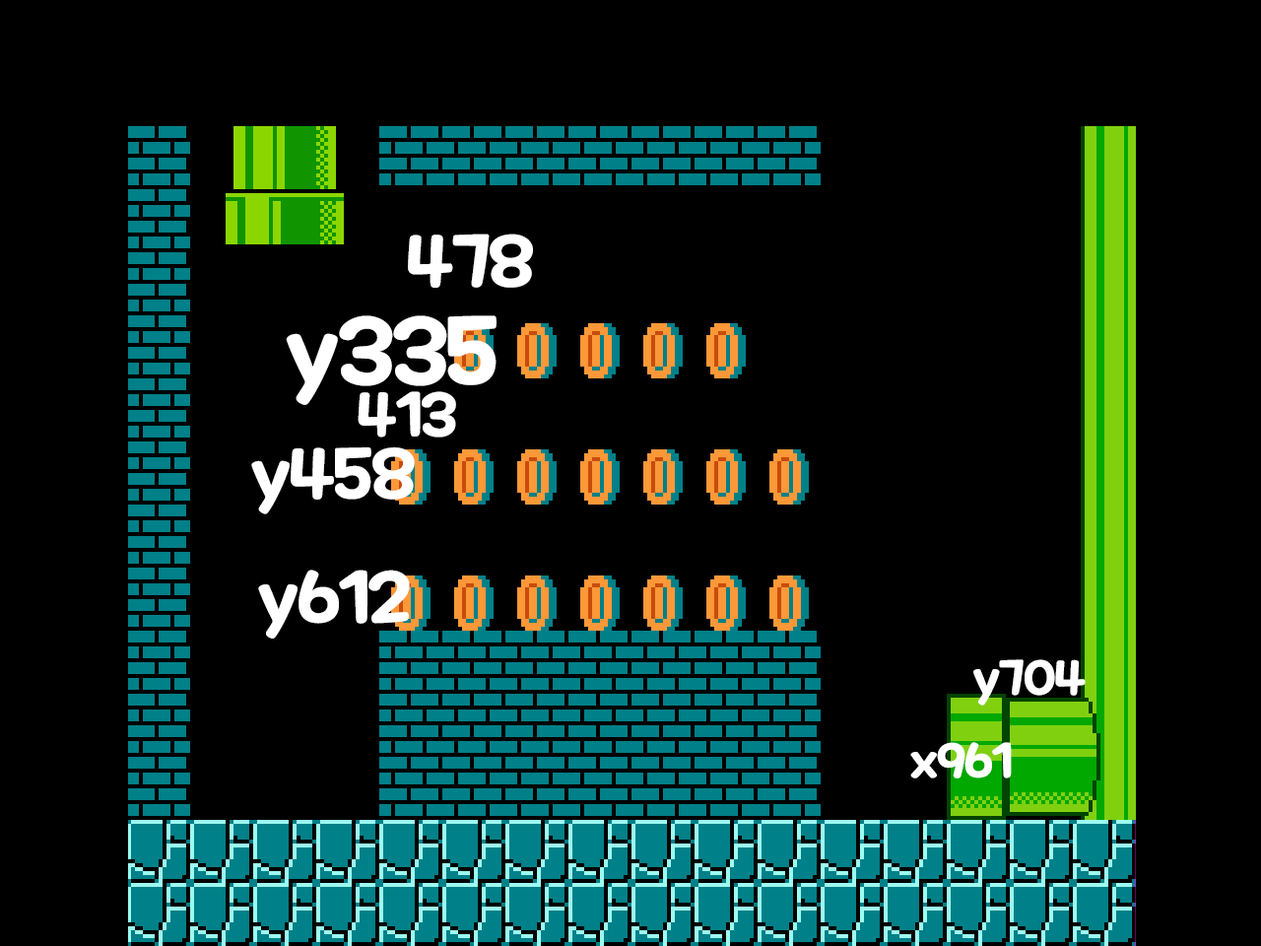
<style>
.page{position:relative;width:1261px;height:946px;background:#000000}
.page>*{position:absolute;margin:0}
.t1{font:71.2px "MaplestoryBold";letter-spacing:-0.01em;color:#ffffff}
.t2{font:92.7px "MaplestoryBold";letter-spacing:-0.01em;color:#ffffff}
.t3{font:60.2px "MaplestoryBold";letter-spacing:-0.01em;color:#ffffff}
.t4{font:69.2px "MaplestoryBold";letter-spacing:-0.01em;color:#ffffff}
.t5{font:70.9px "MaplestoryBold";letter-spacing:-0.01em;color:#ffffff}
.t6{font:47.3px "MaplestoryBold";letter-spacing:-0.01em;color:#ffffff}
</style>
<div class="page">
<p class="t1" style="left:408px;top:233px;width:125px;height:55px">478</p>
<p class="t2" style="left:286px;top:315px;width:210px;height:90px">y335</p>
<p class="t3" style="left:358px;top:391px;width:98px;height:46px">413</p>
<p class="t4" style="left:251px;top:447px;width:164px;height:67px">y458</p>
<p class="t5" style="left:258px;top:569px;width:152px;height:69px">y612</p>
<p class="t6" style="left:973px;top:659px;width:113px;height:46px">y704</p>
<p class="t6" style="left:910px;top:742px;width:102px;height:36px">x961</p>
</div>
